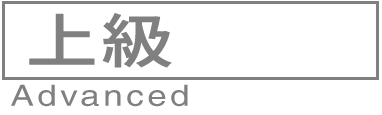
<style>
.page{position:relative;width:382px;height:115px;background:#ffffff}
.page>*{position:absolute;margin:0}
.t1{font:58px "Sarasa-Gothic-J-SemiBold";letter-spacing:0.026em;color:#808080;font-weight:bold;scale:1.23 1}
.t2{font:29.2px "Helvetica";letter-spacing:0.1em;color:#808080;scale:1.2 1}
</style>
<div class="page">
<p class="t1" style="left:29px;top:13px;width:143px;height:55px">上級</p>
<p class="t2" style="left:11px;top:84px;width:177px;height:23px">Advanced</p>
</div>
